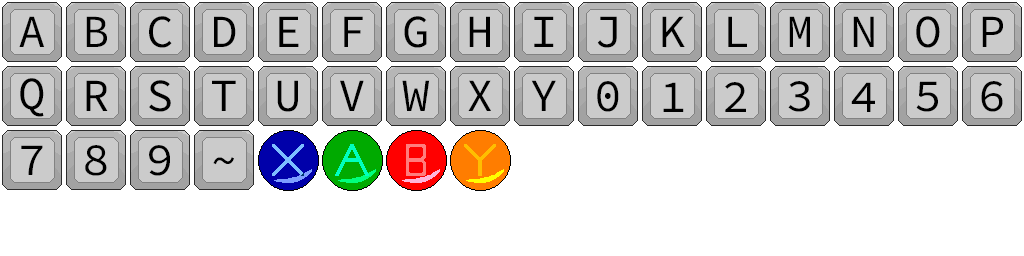
<style>
.page{position:relative;width:1024px;height:256px;background:#ffffff}
.page>*{position:absolute;margin:0}
.t1{font:46px "SourceCodePro-Regular";color:#000000}
</style>
<div class="page">
<p class="t1" style="left:19px;top:16px;width:26px;height:31px">A</p>
<p class="t1" style="left:86px;top:16px;width:21px;height:31px">B</p>
<p class="t1" style="left:149px;top:16px;width:23px;height:32px">C</p>
<p class="t1" style="left:214px;top:16px;width:22px;height:31px">D</p>
<p class="t1" style="left:279px;top:16px;width:20px;height:31px">E</p>
<p class="t1" style="left:344px;top:16px;width:19px;height:31px">F</p>
<p class="t1" style="left:404px;top:16px;width:23px;height:32px">G</p>
<p class="t1" style="left:469px;top:16px;width:21px;height:31px">H</p>
<p class="t1" style="left:534px;top:16px;width:20px;height:31px">I</p>
<p class="t1" style="left:597px;top:16px;width:20px;height:32px">J</p>
<p class="t1" style="left:662px;top:16px;width:23px;height:31px">K</p>
<p class="t1" style="left:728px;top:16px;width:19px;height:31px">L</p>
<p class="t1" style="left:789px;top:16px;width:21px;height:31px">M</p>
<p class="t1" style="left:853px;top:16px;width:21px;height:31px">N</p>
<p class="t1" style="left:916px;top:16px;width:24px;height:32px">O</p>
<p class="t1" style="left:982px;top:16px;width:21px;height:31px">P</p>
<p class="t1" style="left:20px;top:78px;width:24px;height:39px">Q</p>
<p class="t1" style="left:86px;top:80px;width:22px;height:31px">R</p>
<p class="t1" style="left:149px;top:80px;width:22px;height:32px">S</p>
<p class="t1" style="left:212px;top:80px;width:24px;height:31px">T</p>
<p class="t1" style="left:277px;top:80px;width:21px;height:32px">U</p>
<p class="t1" style="left:340px;top:80px;width:24px;height:31px">V</p>
<p class="t1" style="left:402px;top:80px;width:28px;height:31px">W</p>
<p class="t1" style="left:468px;top:80px;width:23px;height:31px">X</p>
<p class="t1" style="left:531px;top:80px;width:25px;height:31px">Y</p>
<p class="t1" style="left:597px;top:81px;width:22px;height:31px">0</p>
<p class="t1" style="left:663px;top:82px;width:21px;height:30px">1</p>
<p class="t1" style="left:725px;top:82px;width:21px;height:30px">2</p>
<p class="t1" style="left:788px;top:81px;width:22px;height:31px">3</p>
<p class="t1" style="left:851px;top:82px;width:24px;height:30px">4</p>
<p class="t1" style="left:916px;top:81px;width:22px;height:31px">5</p>
<p class="t1" style="left:981px;top:81px;width:22px;height:31px">6</p>
<p class="t1" style="left:21px;top:145px;width:22px;height:30px">7</p>
<p class="t1" style="left:85px;top:145px;width:22px;height:31px">8</p>
<p class="t1" style="left:149px;top:145px;width:21px;height:31px">9</p>
<p class="t1" style="left:213px;top:157px;width:21px;height:8px">~</p>
</div>
